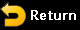
<style>
.page{position:relative;width:80px;height:30px;background:#000000}
.page>*{position:absolute;margin:0}
.t1{font:13.3px "MicrosoftYaHei";color:#ffffff;font-weight:bold}
</style>
<div class="page">
<p class="t1" style="left:31px;top:10px;width:45px;height:10px">Return</p>
</div>
